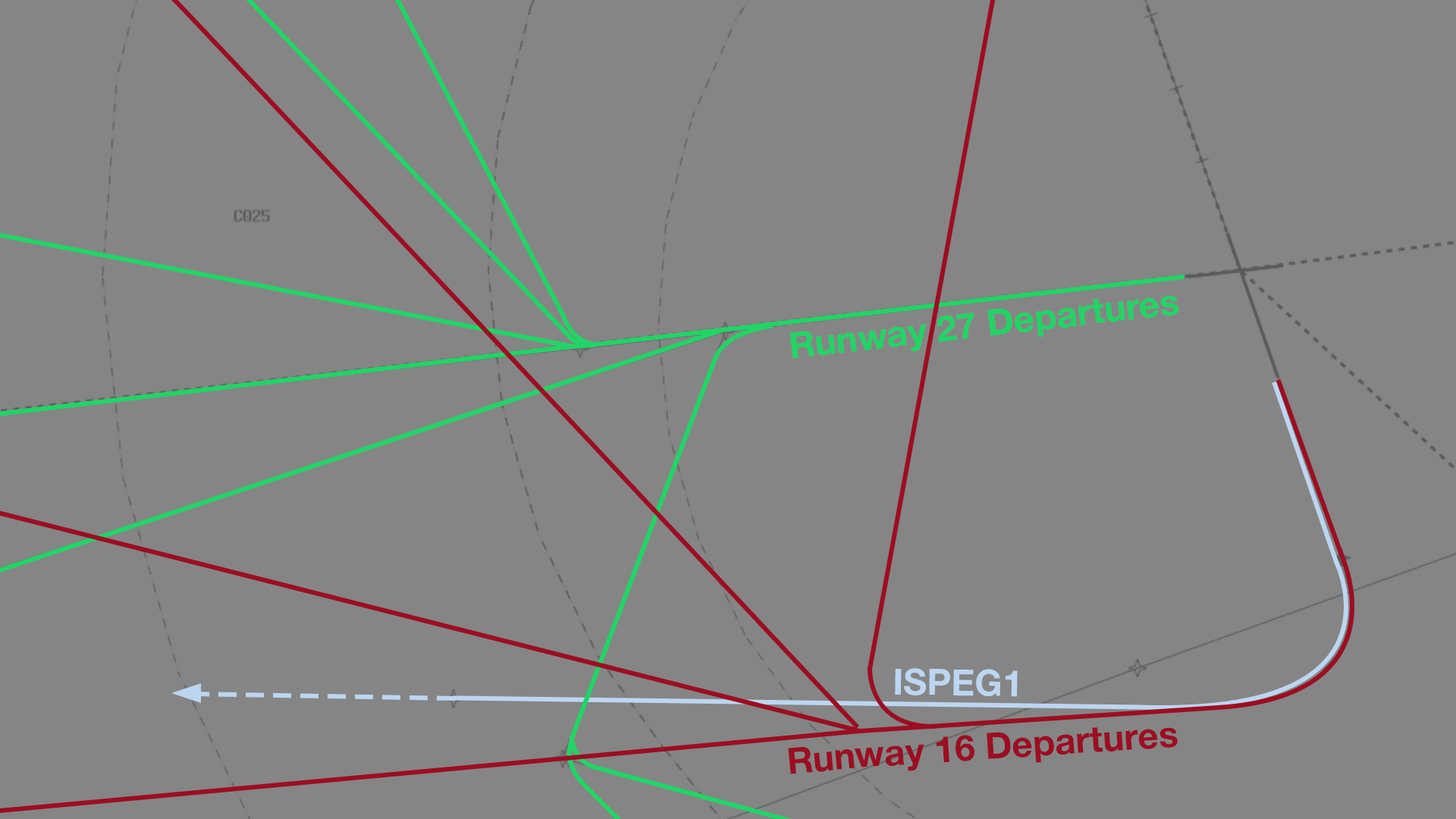
<style>
.page{position:relative;width:1456px;height:819px;background:#858585}
.page>*{position:absolute;margin:0}
.t1{font:36.4px "HelveticaNeue-Bold";color:#22d465}
.t2{font:36.4px "HelveticaNeue-Bold";color:#bcd6f1}
.t3{font:36.4px "HelveticaNeue-Bold";color:#9b0e22}
</style>
<div class="page">
<p class="t1" style="left:789px;top:296px;width:390px;height:63px;text-align:center">Runway 27 Departures</p>
<p class="t2" style="left:895px;top:668px;width:123px;height:29px">ISPEG1</p>
<p class="t3" style="left:788px;top:727px;width:390px;height:47px">Runway 16 Departures</p>
</div>
